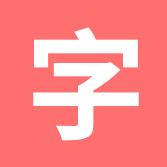
<style>
.page{position:relative;width:167px;height:167px;background:#fe6f6f}
.page>*{position:absolute;margin:0}
.t1{font:120px "NotoSansCJKsc-Bold";color:#ffffff}
</style>
<div class="page">
<p class="t1" style="left:33px;top:27px;width:106px;height:114px">字</p>
</div>
